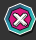
<style>
.page{position:relative;width:36px;height:40px;background:#333333}
.page>*{position:absolute;margin:0}
.t1{font:34.6px "Algerian";color:#ffffff}
</style>
<div class="page">
<p class="t1" style="left:13px;top:13px;width:15px;height:14px">×</p>
</div>
